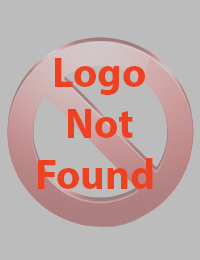
<style>
.page{position:relative;width:200px;height:260px;background:#bcbcbc}
.page>*{position:absolute;margin:0}
.t1{font:42.3px "MyriadHebrew-Bold";color:#ed4221}
</style>
<div class="page">
<p class="t1" style="left:38px;top:58px;width:115px;height:131px;text-align:center">Logo <br>Not <br>Found</p>
</div>
